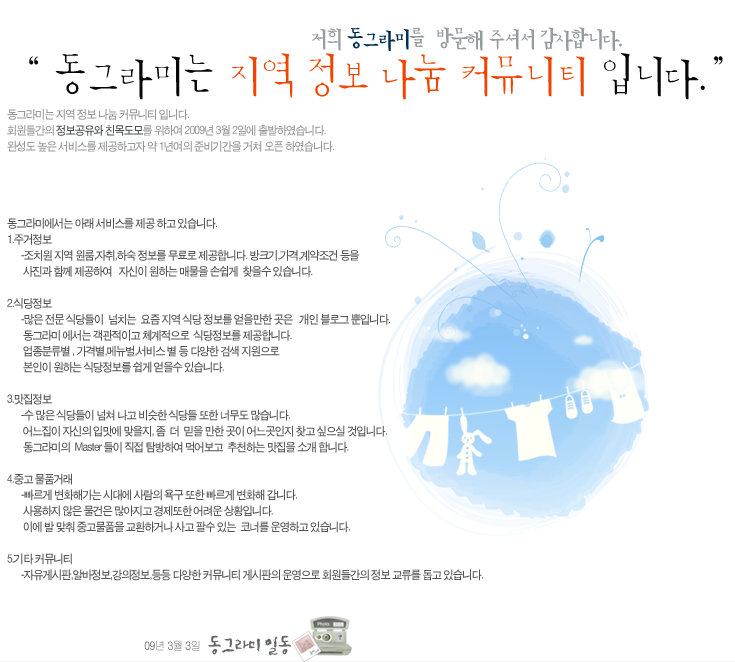
<style>
.page{position:relative;width:735px;height:662px;background:#ffffff}
.page>*{position:absolute;margin:0}
.t1{font:24px "YDIBlueEB";letter-spacing:-0.075em;color:#969b9f;scale:0.9 1}
.t2{font:24px "YDIBlueEB";letter-spacing:-0.075em;color:#002f54;scale:0.9 1}
.t3{font:48px "YDIBlueM";letter-spacing:-0.05em;color:#f14400;scale:0.9 1}
.t4{font:48px "Gulim";letter-spacing:-0.05em;color:#202020;scale:0.9 1}
.t5{font:48px "YDIBlueM";letter-spacing:-0.05em;color:#070707;scale:0.9 1}
.t6{font:12px/16px "SandArB";letter-spacing:-0.075em;color:#979797;scale:0.95 1}
.t7{font:12px/16px "SandArB";letter-spacing:-0.075em;color:#4c4f4f;scale:0.95 1}
.t8{font:12px/16px "SandArB";letter-spacing:-0.075em;color:#545454;scale:0.95 1}
.t9{font:12px "Gulim";letter-spacing:-0.075em;scale:0.9 1}
.t10{font:24px "SanKbM";letter-spacing:-0.075em;color:#666767;scale:0.9 1}
</style>
<div class="page">
<p class="t1" style="left:312px;top:27px;width:310px;height:24px">저희 <span class="t2">동그라미</span>를  방문해 주셔서 감사합니다.</p>
<p class="t3" style="left:29px;top:53px;width:694px;height:47px"><span class="t4"> </span><span class="t5">“ 동그라미는 </span>지역 정보 나눔 커뮤니티<span class="t5"> 입니다.”</span></p>
<p class="t6" style="left:7px;top:109px;width:327px;height:43px">동그라미는 지역 정보 나눔 커뮤니티 입니다.<br>회원들간의 <span class="t7">정보공유와 친목도모</span>를 위하여 2009년 3월 2일에 출발하였습니다.<br>완성도 높은 서비스를 제공하고자 약 1년여의 준비기간을 거쳐 오픈 하였습니다.</p>
<p class="t8" style="left:7px;top:218px;width:476px;height:363px">동그라미에서는 아래 서비스를 제공 하고 있습니다.<br>1.주거정보<br>      -조치원 지역 원룸,자취,하숙 정보를 무료로 제공합니다. 방크기,가격,계약조건 등을 <br>       사진과 함께 제공하여   자신이 원하는 매물을 손쉽게  찾을수 있습니다.<br><br>2.식당정보<br>      -많은 전문 식당들이  넘치는  요즘 지역 식당 정보를 얻을만한 곳은   개인 블로그 뿐입니다.  <br>       동그라미 에서는 객관적이고 체계적으로  식당정보를 제공합니다.<br>       업종분류별 , 가격별,메뉴벌,서비스 별 등 다양한 검색 지원으로<br>       본인이 원하는 식당정보를 쉽게 얻을수 있습니다.<br><br>3.맛집정보<br>      -수 많은 식당들이 넘쳐 나고 비슷한 식당들 또한 너무도 많습니다. <br>       어느집이 자신의 입맛에 맞을지, 좀  더  믿을 만한 곳이 어느곳인지 찾고 싶으실 것입니다.  <br>       동그라미의  Master 들이 직접 탐방하여 먹어보고  추천하는 맛집을 소개 합니다.<br><br>4.중고 물품거래<br>      -빠르게 변화해가는 시대에 사람의 욕구 또한 빠르게 변화해 갑니다. <br>       사용하지 않은 물건은 많아지고 경제또한 어려운 상황입니다.<br>       이에 발 맞춰 중고물품을 교환하거나 사고 팔수 있는  코너를 운영하고 있습니다.  <br><br>5.기타 커뮤니티<br>      -자유게시판,알바정보,강의정보,등등 다양한 커뮤니티 게시판의 운영으로 회원들간의 정보 교류를 돕고 있습니다.</p>
<p class="t9" style="left:144px;top:640px;width:56px;height:11px">09년 3월 3일</p>
<p class="t10" style="left:208px;top:635px;width:84px;height:21px">동그라미 일동</p>
</div>
